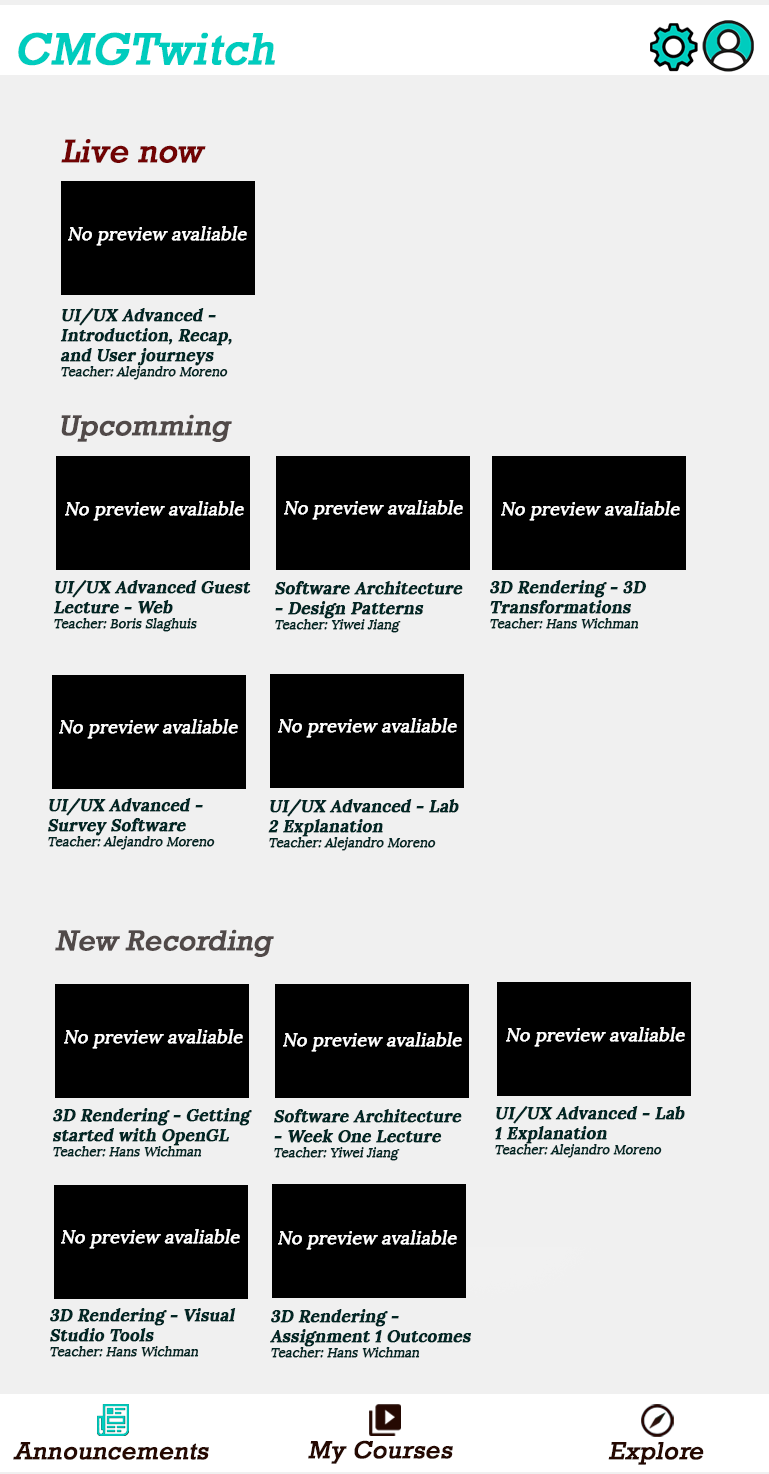
<style>
.page{position:relative;width:769px;height:1474px;background:#f0f0f0}
.page>*{position:absolute;margin:0}
.t1{font:45.4px "Rockwell";color:#00ccbe;font-weight:bold;font-style:italic}
.t2{font:33.3px "Rockwell";color:#710303;font-weight:bold;font-style:italic}
.t3{font:17.7px "Lora-Regular";color:#ffffff;font-weight:bold;font-style:italic}
.t4{font:16.7px "Lora-Bold";color:#022624;font-weight:bold;font-style:italic}
.t5{font:12.5px "Lora-Regular";color:#022624;font-weight:bold;font-style:italic}
.t6{font:29.2px "Rockwell";color:#504948;font-weight:bold;font-style:italic}
.t7{font:25px "Rockwell";color:#250902;font-weight:bold;font-style:italic}
</style>
<div class="page">
<p class="t1" style="left:18px;top:32px;width:257px;height:34px">CMGTwitch</p>
<p class="t2" style="left:61px;top:139px;width:145px;height:24px">Live now</p>
<p class="t3" style="left:68px;top:226px;width:179px;height:20px">No preview avaliable</p>
<p class="t4" style="left:60px;top:308px;width:172px;height:72px">UI/UX Advanced - Introduction, Recap, and User journeys<br><span class="t5">Teacher: Alejandro Moreno</span></p>
<p class="t6" style="left:61px;top:414px;width:171px;height:28px">Upcomming</p>
<p class="t3" style="left:65px;top:501px;width:179px;height:20px">No preview avaliable</p>
<p class="t3" style="left:284px;top:500px;width:179px;height:20px">No preview avaliable</p>
<p class="t3" style="left:501px;top:501px;width:179px;height:20px">No preview avaliable</p>
<p class="t4" style="left:53px;top:580px;width:198px;height:52px">UI/UX Advanced Guest Lecture - Web<br><span class="t5">Teacher: Boris Slaghuis</span></p>
<p class="t4" style="left:275px;top:581px;width:188px;height:52px">Software Architecture - Design Patterns<br><span class="t5">Teacher: Yiwei Jiang</span></p>
<p class="t4" style="left:490px;top:580px;width:156px;height:49px">3D Rendering - 3D Transformations<br><span class="t5">Teacher: Hans Wichman</span></p>
<p class="t3" style="left:59px;top:719px;width:179px;height:20px">No preview avaliable</p>
<p class="t3" style="left:278px;top:718px;width:179px;height:20px">No preview avaliable</p>
<p class="t4" style="left:48px;top:798px;width:167px;height:52px">UI/UX Advanced - Survey Software<br><span class="t5">Teacher: Alejandro Moreno</span></p>
<p class="t4" style="left:268px;top:799px;width:191px;height:52px">UI/UX Advanced - Lab 2 Explanation<br><span class="t5">Teacher: Alejandro Moreno</span></p>
<p class="t6" style="left:55px;top:929px;width:219px;height:28px">New Recording</p>
<p class="t3" style="left:64px;top:1029px;width:179px;height:20px">No preview avaliable</p>
<p class="t3" style="left:283px;top:1032px;width:179px;height:20px">No preview avaliable</p>
<p class="t3" style="left:506px;top:1027px;width:179px;height:20px">No preview avaliable</p>
<p class="t4" style="left:52px;top:1108px;width:200px;height:49px">3D Rendering - Getting started with OpenGL<br><span class="t5">Teacher: Hans Wichman</span></p>
<p class="t4" style="left:274px;top:1109px;width:188px;height:52px">Software Architecture - Week One Lecture<br><span class="t5">Teacher: Yiwei Jiang</span></p>
<p class="t4" style="left:495px;top:1106px;width:190px;height:52px">UI/UX Advanced - Lab 1 Explanation<br><span class="t5">Teacher: Alejandro Moreno</span></p>
<p class="t3" style="left:61px;top:1229px;width:179px;height:20px">No preview avaliable</p>
<p class="t3" style="left:278px;top:1230px;width:179px;height:20px">No preview avaliable</p>
<p class="t4" style="left:50px;top:1308px;width:186px;height:49px">3D Rendering - Visual Studio Tools<br><span class="t5">Teacher: Hans Wichman</span></p>
<p class="t4" style="left:270px;top:1309px;width:201px;height:49px">3D Rendering - Assignment 1 Outcomes<br><span class="t5">Teacher: Hans Wichman</span></p>
<p class="t7" style="left:13px;top:1442px;width:196px;height:18px">Announcements</p>
<p class="t7" style="left:308px;top:1440px;width:145px;height:24px">My Courses</p>
<p class="t7" style="left:608px;top:1442px;width:96px;height:23px">Explore</p>
</div>
